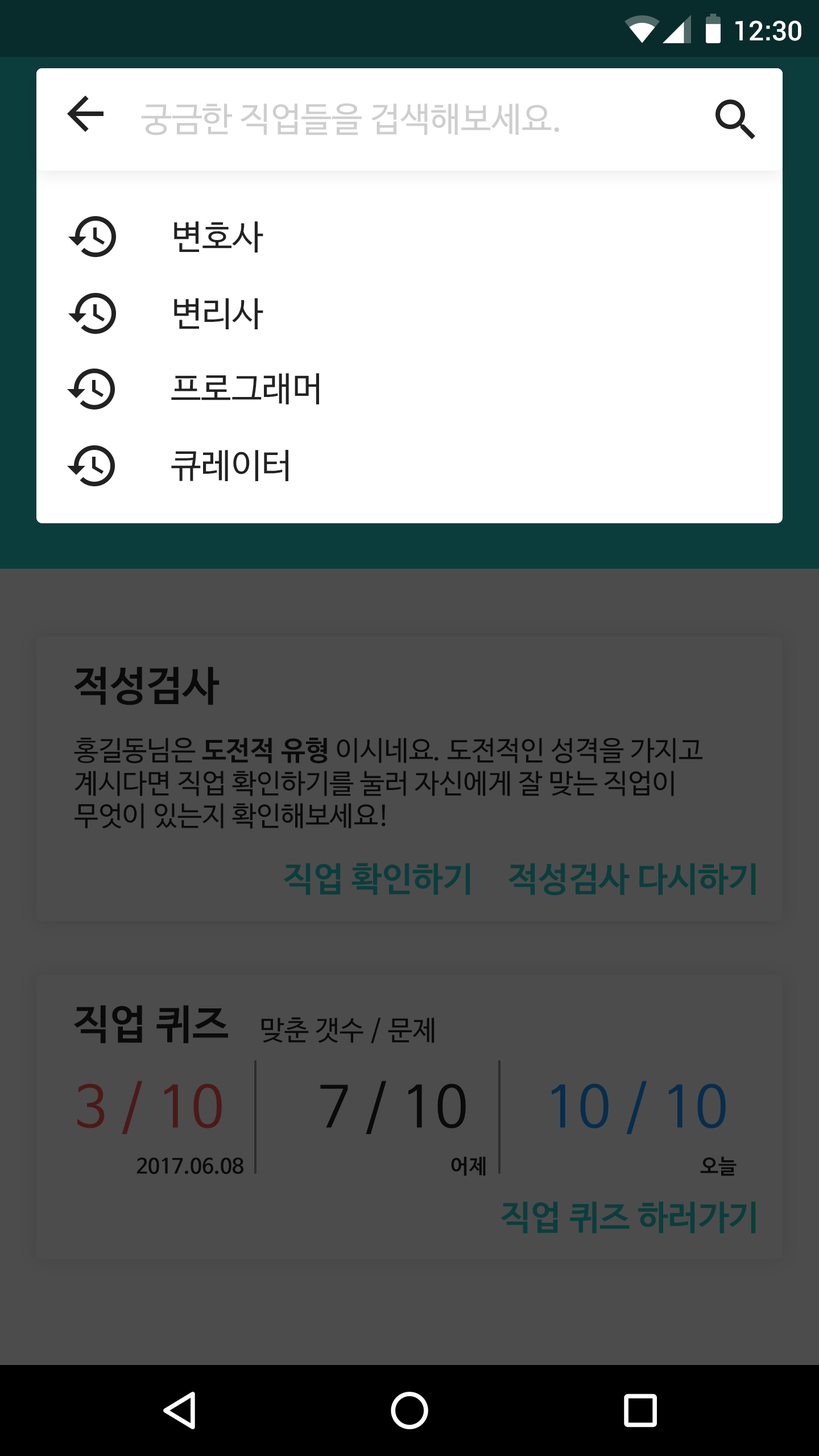
<style>
.page{position:relative;width:819px;height:1456px;background:#4c4c4c}
.page>*{position:absolute;margin:0}
.t1{font:27.3px "Roboto-Medium";color:#ffffff}
.t2{font:34.1px "NanumBarunGothic";color:#cecece}
.t3{font:34.1px "NanumBarunGothic";color:#222222}
.t4{font:40.9px "NanumBarunGothicBold";color:#222222}
.t5{font:27.3px "NanumBarunGothic";color:#222222}
.t6{font:27.3px "NanumBarunGothicBold";color:#222222}
.t7{font:34.1px "NanumBarunGothicBold";color:#0c3d3d}
.t8{font:56.9px "NanumBarunGothic";color:#4c1919}
.t9{font:56.9px "NanumBarunGothic";color:#222222}
.t10{font:56.9px "NanumBarunGothic";color:#082d4c}
.t11{font:20.5px "NanumBarunGothicBold";color:#222222}
</style>
<div class="page">
<p class="t1" style="left:735px;top:20px;width:66px;height:21px">12:30</p>
<p class="t2" style="left:141px;top:103px;width:418px;height:32px">궁금한 직업들을 겁색해보세요.</p>
<p class="t3" style="left:174px;top:221px;width:89px;height:32px">변호사</p>
<p class="t3" style="left:174px;top:298px;width:89px;height:31px">변리사</p>
<p class="t3" style="left:171px;top:373px;width:148px;height:31px">프로그래머</p>
<p class="t3" style="left:171px;top:450px;width:117px;height:31px">큐레이터</p>
<p class="t4" style="left:74px;top:667px;width:146px;height:38px">적성검사</p>
<p class="t5" style="left:74px;top:738px;width:628px;height:91px">홍길동님은 <span class="t6">도전적 유형</span> 이시네요. 도전적인 성격을 가지고<br>계시다면 직업 확인하기를 눌러 자신에게 잘 맞는 직업이<br>무엇이 있는지 확인해보세요!</p>
<p class="t7" style="left:283px;top:863px;width:187px;height:32px">직업 확인하기</p>
<p class="t7" style="left:508px;top:863px;width:248px;height:32px">적성검사 다시하기</p>
<p class="t4" style="left:73px;top:1005px;width:155px;height:39px">직업 퀴즈</p>
<p class="t5" style="left:261px;top:1017px;width:174px;height:27px">맞춘 갯수 / 문제</p>
<p class="t8" style="left:77px;top:1081px;width:145px;height:53px">3 / 10</p>
<p class="t9" style="left:320px;top:1081px;width:146px;height:53px">7 / 10</p>
<p class="t10" style="left:552px;top:1081px;width:174px;height:53px">10 / 10</p>
<p class="t11" style="left:136px;top:1157px;width:107px;height:17px">2017.06.08</p>
<p class="t11" style="left:451px;top:1156px;width:35px;height:20px">어제</p>
<p class="t11" style="left:700px;top:1156px;width:37px;height:20px">오늘</p>
<p class="t7" style="left:500px;top:1201px;width:256px;height:33px">직업 퀴즈 하러가기</p>
</div>
